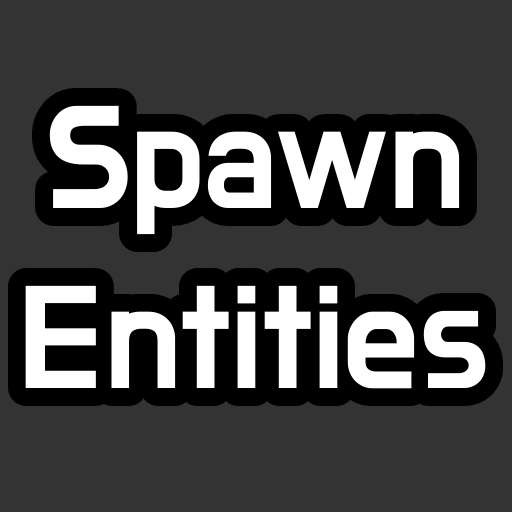
<style>
.page{position:relative;width:512px;height:512px;background:#333333}
.page>*{position:absolute;margin:0}
.t1{font:150px "DoHyeon-Regular";color:#ffffff}
</style>
<div class="page">
<p class="t1" style="left:25px;top:105px;width:461px;height:284px;text-align:center">Spawn<br>Entities</p>
</div>
